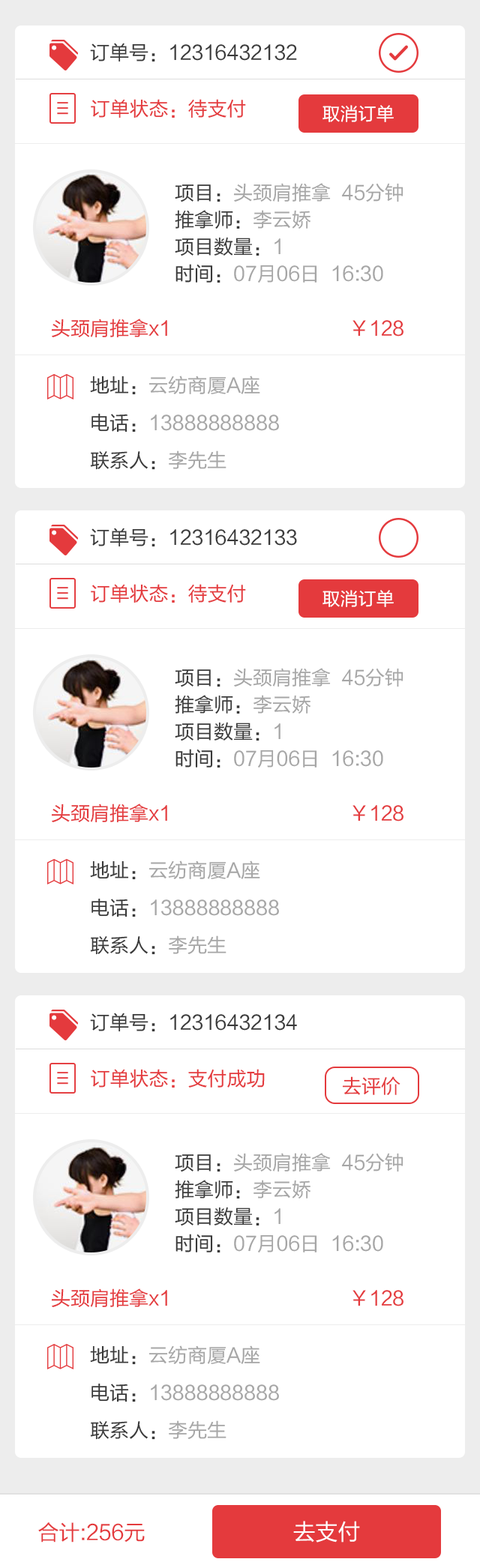
<style>
.page{position:relative;width:480px;height:1568px;background:#ffffff}
.page>*{position:absolute;margin:0}
.t1{font:19.5px "FZLTHJW--GB1-0";color:#393939}
.t2{font:19.5px "FZLTHJW--GB1-0";color:#e43a3d}
.t3{font:18px "FZLTHJW--GB1-0";color:#ffffff}
.t4{font:19.5px/27px "FZLTHJW--GB1-0";color:#a6a6a6}
.t5{font:19.5px/27px "FZLTHJW--GB1-0";color:#393939}
.t6{font:19.5px/37.5px "FZLTHJW--GB1-0";color:#a6a6a6}
.t7{font:19.5px/37.5px "FZLTHJW--GB1-0";color:#393939}
.t8{font:21px "FZLTHJW--GB1-0";color:#e43a3d}
.t9{font:22.5px "FZLTHJW--GB1-0";color:#ffffff}
</style>
<div class="page">
<p class="t1" style="left:90px;top:43px;width:207px;height:19px">订单号：12316432132</p>
<p class="t2" style="left:91px;top:99px;width:155px;height:19px">订单状态：待支付</p>
<p class="t3" style="left:322px;top:105px;width:71px;height:17px">取消订单</p>
<p class="t4" style="left:175px;top:183px;width:228px;height:100px"><span class="t5">项目：</span>头颈肩推拿  45分钟<br><span class="t5">推拿师：</span>李云娇<br><span class="t5">项目数量：</span>1<br><span class="t5">时间：</span>07月06日  16:30</p>
<p class="t2" style="left:51px;top:319px;width:352px;height:19px">头颈肩推拿x1                                 ￥128</p>
<p class="t6" style="left:90px;top:376px;width:189px;height:94px"><span class="t7">地址：</span>云纺商厦A座<br><span class="t7">电话：</span>13888888888<br><span class="t7">联系人：</span>李先生</p>
<p class="t1" style="left:90px;top:528px;width:207px;height:19px">订单号：12316432133</p>
<p class="t2" style="left:91px;top:584px;width:155px;height:19px">订单状态：待支付</p>
<p class="t3" style="left:322px;top:590px;width:71px;height:17px">取消订单</p>
<p class="t4" style="left:175px;top:668px;width:228px;height:100px"><span class="t5">项目：</span>头颈肩推拿  45分钟<br><span class="t5">推拿师：</span>李云娇<br><span class="t5">项目数量：</span>1<br><span class="t5">时间：</span>07月06日  16:30</p>
<p class="t2" style="left:51px;top:803px;width:352px;height:20px">头颈肩推拿x1                                 ￥128</p>
<p class="t6" style="left:90px;top:860px;width:189px;height:95px"><span class="t7">地址：</span>云纺商厦A座<br><span class="t7">电话：</span>13888888888<br><span class="t7">联系人：</span>李先生</p>
<p class="t1" style="left:90px;top:1013px;width:207px;height:19px">订单号：12316432134</p>
<p class="t2" style="left:91px;top:1069px;width:174px;height:19px">订单状态：支付成功</p>
<p class="t2" style="left:342px;top:1076px;width:58px;height:19px">去评价</p>
<p class="t4" style="left:175px;top:1153px;width:228px;height:100px"><span class="t5">项目：</span>头颈肩推拿  45分钟<br><span class="t5">推拿师：</span>李云娇<br><span class="t5">项目数量：</span>1<br><span class="t5">时间：</span>07月06日  16:30</p>
<p class="t2" style="left:51px;top:1288px;width:352px;height:20px">头颈肩推拿x1                                 ￥128</p>
<p class="t6" style="left:90px;top:1345px;width:189px;height:95px"><span class="t7">地址：</span>云纺商厦A座<br><span class="t7">电话：</span>13888888888<br><span class="t7">联系人：</span>李先生</p>
<p class="t8" style="left:38px;top:1522px;width:107px;height:21px">合计:256元</p>
<p class="t9" style="left:293px;top:1521px;width:67px;height:22px">去支付</p>
</div>
